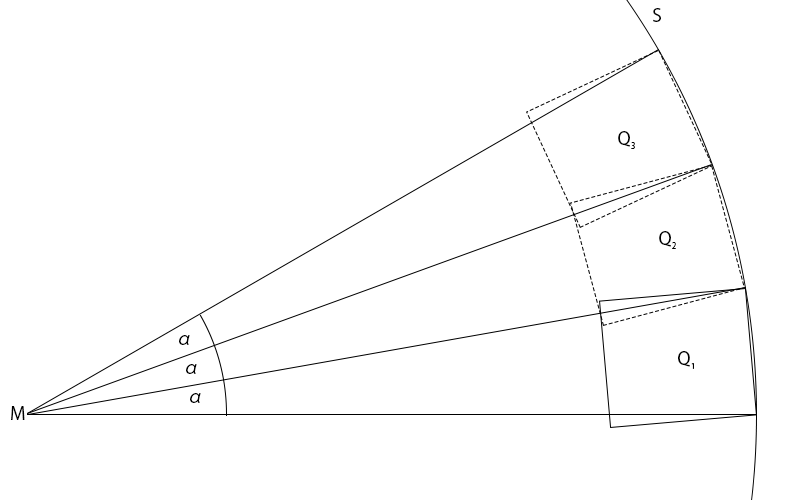
<style>
.page{position:relative;width:800px;height:500px;background:#ffffff}
.page>*{position:absolute;margin:0}
.t1{font:18px "KozGoPr6N-Regular";color:#000000}
.t2{font:8px "KozGoPr6N-Regular";color:#000000}
</style>
<div class="page">
<p class="t1" style="left:653px;top:8px;width:8px;height:14px">S</p>
<p class="t1" style="left:618px;top:131px;width:12px;height:16px">Q</p>
<p class="t2" style="left:631px;top:142px;width:4px;height:7px">3</p>
<p class="t1" style="left:659px;top:231px;width:12px;height:16px">Q</p>
<p class="t2" style="left:672px;top:242px;width:4px;height:7px">2</p>
<p class="t1" style="left:179px;top:335px;width:11px;height:10px">α</p>
<p class="t1" style="left:678px;top:351px;width:12px;height:16px">Q</p>
<p class="t1" style="left:186px;top:364px;width:11px;height:10px">α</p>
<p class="t2" style="left:691px;top:363px;width:3px;height:6px">1</p>
<p class="t1" style="left:190px;top:393px;width:11px;height:10px">α</p>
<p class="t1" style="left:11px;top:406px;width:14px;height:14px">M</p>
</div>
